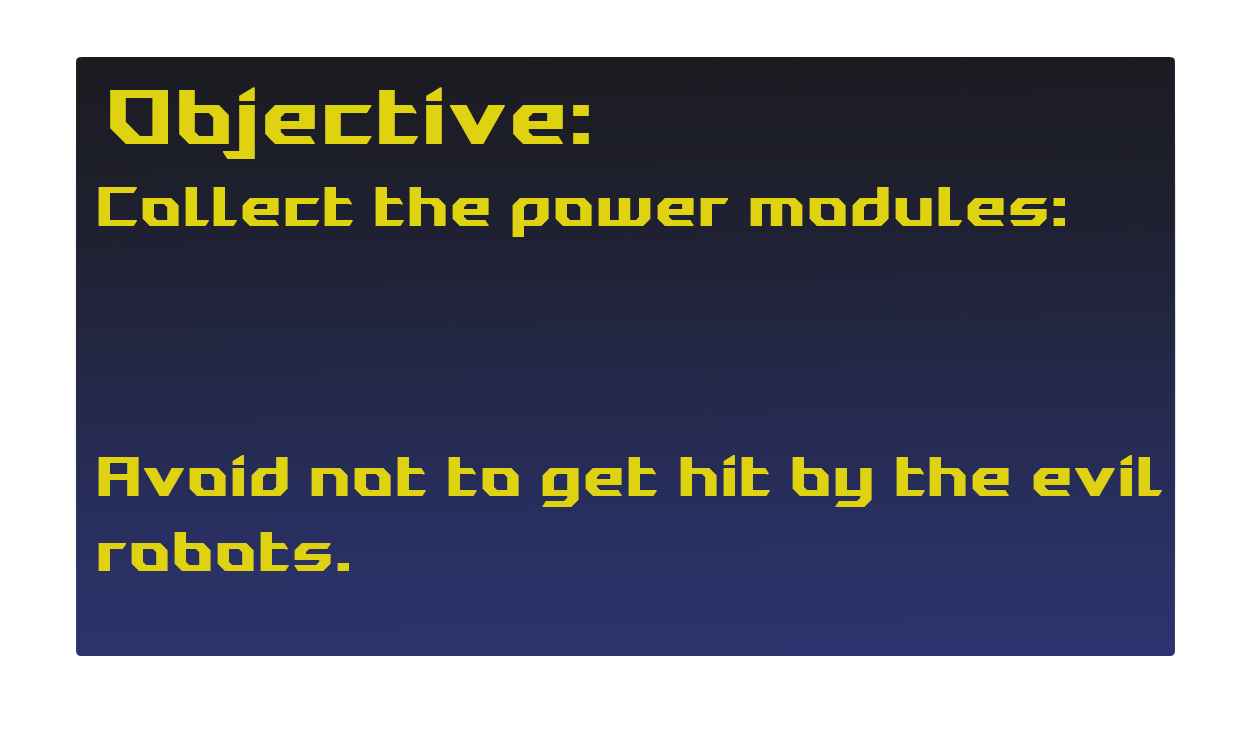
<style>
.page{position:relative;width:1236px;height:739px;background:#ffffff}
.page>*{position:absolute;margin:0}
.t1{font:75px "ROGLyonsType-Regular";color:#ded211;font-weight:bold}
.t2{font:53.7px/15px "ROGLyonsType-Regular";color:#ded211;font-weight:bold}
.t3{font:53.7px/37.5px "ROGLyonsType-Regular";color:#ded211;font-weight:bold}
</style>
<div class="page">
<p class="t1" style="left:110px;top:87px;width:479px;height:72px">Objective:</p>
<p class="t2" style="left:98px;top:187px;width:1064px;height:384px">Collect the power modules:<br><br><br><br><br><br><br><br><br><br><br><br><br><br><br><br><br><br>Avoid not to get hit by the evil <br><span class="t3"><br>robots.</span></p>
</div>
